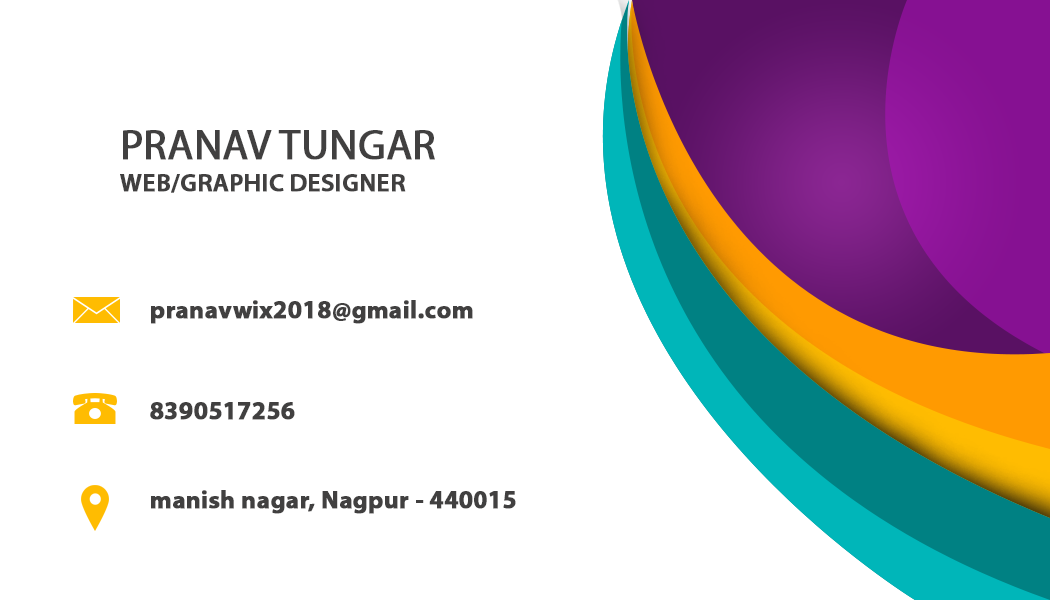
<style>
.page{position:relative;width:1050px;height:600px;background:#ffffff}
.page>*{position:absolute;margin:0}
.t1{font:41.7px "MyriadPro-Regular";color:#414040;font-weight:bold}
.t2{font:25px "MyriadPro-Semibold";color:#414040;font-weight:bold}
.t3{font:25px "MyriadPro-Bold";color:#414040;font-weight:bold}
</style>
<div class="page">
<p class="t1" style="left:123px;top:130px;width:312px;height:30px">PRANAV TUNGAR</p>
<p class="t2" style="left:120px;top:174px;width:286px;height:19px">WEB/GRAPHIC DESIGNER</p>
<p class="t3" style="left:151px;top:300px;width:322px;height:24px">pranavwix2018@gmail.com</p>
<p class="t3" style="left:150px;top:402px;width:145px;height:18px">8390517256</p>
<p class="t3" style="left:151px;top:490px;width:365px;height:24px">manish nagar, Nagpur - 440015</p>
</div>
